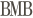
<style>
.page{position:relative;width:33px;height:18px;background:#ffffff}
.page>*{position:absolute;margin:0}
.t1{font:20px "RyuminPro-ExBold";letter-spacing:-0.08em;color:#4c4841;scale:0.72 1}
</style>
<div class="page">
<p class="t1" style="left:0px;top:1px;width:33px;height:15px">BMB</p>
</div>
